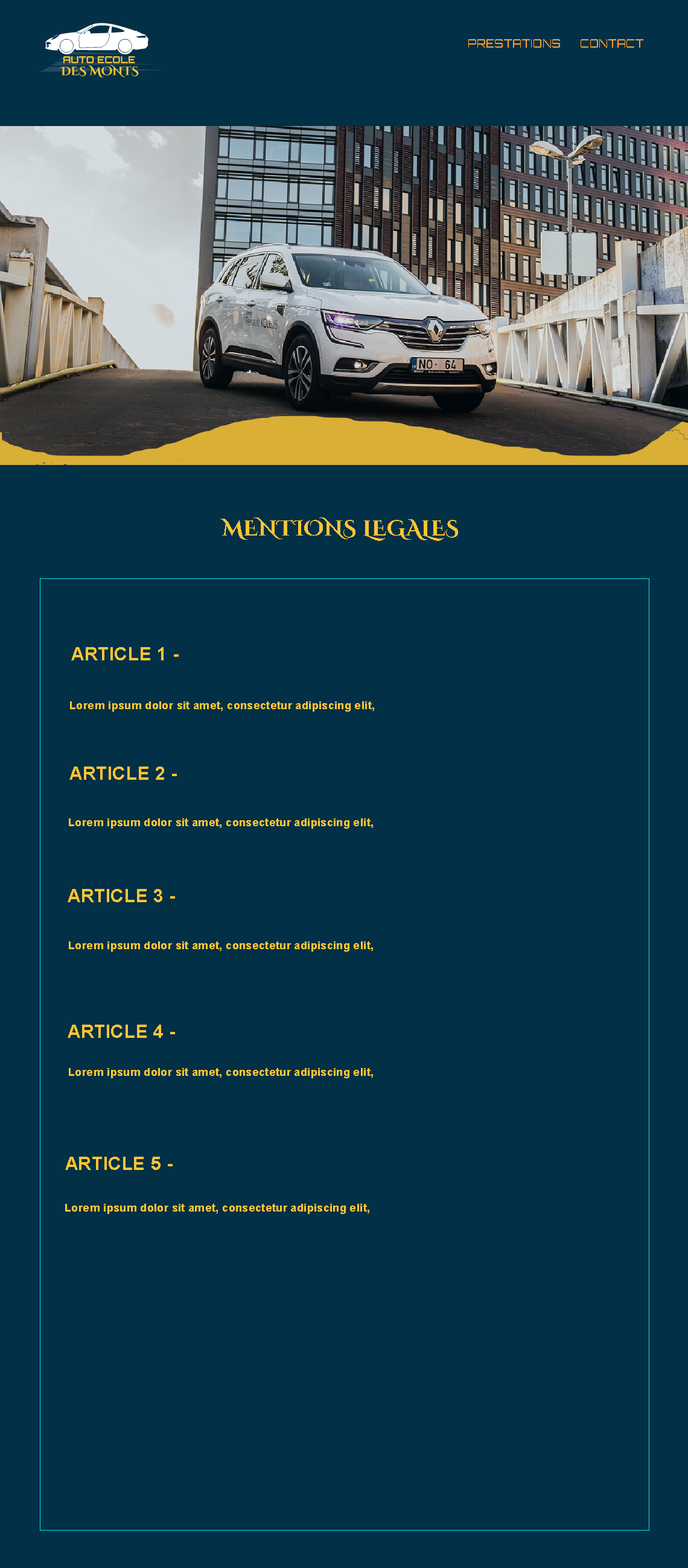
<style>
.page{position:relative;width:688px;height:1568px;background:#023047}
.page>*{position:absolute;margin:0}
.t1{font:10.9px "Orbitron-Regular";letter-spacing:0.02em;color:#ffa033}
.t2{font:21.7px "CinzelDecorative-Bold";letter-spacing:0.02em;color:#ffc533}
.t3{font:18.1px "Arial-BoldMT";letter-spacing:0.02em;color:#ffc533}
.t4{font:10.9px "Arial-BoldMT";letter-spacing:0.02em;color:#ffc533}
</style>
<div class="page">
<p class="t1" style="left:468px;top:39px;width:175px;height:9px">PRESTATIONS      CONTACT</p>
<p class="t2" style="left:220px;top:517px;width:238px;height:24px">MENTIONS LEGALES</p>
<p class="t3" style="left:71px;top:647px;width:108px;height:13px">ARTICLE 1 -</p>
<p class="t4" style="left:70px;top:701px;width:304px;height:11px">Lorem ipsum dolor sit amet, consectetur adipiscing elit,</p>
<p class="t3" style="left:69px;top:767px;width:108px;height:13px">ARTICLE 2 -</p>
<p class="t4" style="left:69px;top:818px;width:304px;height:11px">Lorem ipsum dolor sit amet, consectetur adipiscing elit,</p>
<p class="t3" style="left:68px;top:889px;width:107px;height:13px">ARTICLE 3 -</p>
<p class="t4" style="left:69px;top:941px;width:304px;height:11px">Lorem ipsum dolor sit amet, consectetur adipiscing elit,</p>
<p class="t3" style="left:68px;top:1025px;width:107px;height:13px">ARTICLE 4 -</p>
<p class="t4" style="left:69px;top:1068px;width:304px;height:10px">Lorem ipsum dolor sit amet, consectetur adipiscing elit,</p>
<p class="t3" style="left:65px;top:1157px;width:107px;height:13px">ARTICLE 5 -</p>
<p class="t4" style="left:65px;top:1204px;width:304px;height:10px">Lorem ipsum dolor sit amet, consectetur adipiscing elit,</p>
</div>
